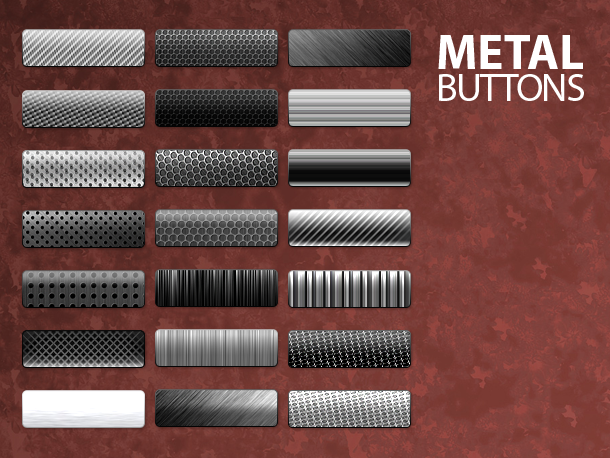
<style>
.page{position:relative;width:610px;height:458px}
.page>*{position:absolute;margin:0}
.t1{font:40px/32px "MyriadPro-Regular";letter-spacing:-0.05em;color:#ffffff;text-transform:uppercase}
.t2{font:49px/32px "MyriadPro-Bold";color:#ffffff;text-transform:uppercase}
</style>
<div class="page">
<p class="t1" style="left:438px;top:35px;width:146px;height:66px"><span class="t2">Metal<br></span>Buttons</p>
</div>
